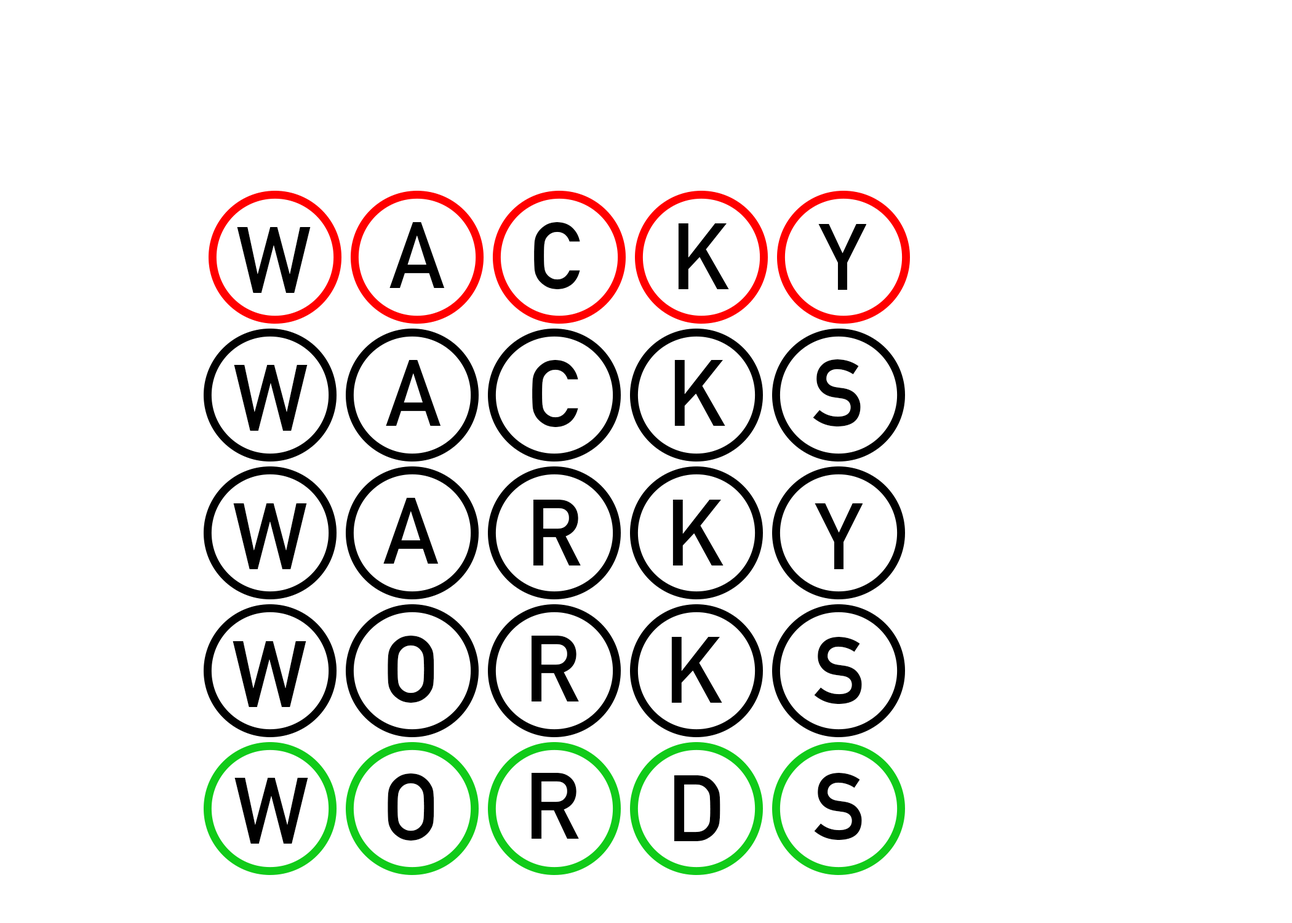
<style>
.page{position:relative;width:1292px;height:923px;background:#ffffff}
.page>*{position:absolute;margin:0}
.t1{font:92.3px "DINAlternate-Bold";color:#000000}
</style>
<div class="page">
<p class="t1" style="left:237px;top:227px;width:74px;height:66px">W</p>
<p class="t1" style="left:389px;top:222px;width:56px;height:66px">A</p>
<p class="t1" style="left:534px;top:222px;width:46px;height:67px">C</p>
<p class="t1" style="left:678px;top:223px;width:51px;height:66px">K</p>
<p class="t1" style="left:818px;top:224px;width:48px;height:66px">Y</p>
<p class="t1" style="left:234px;top:365px;width:74px;height:66px">W</p>
<p class="t1" style="left:386px;top:360px;width:55px;height:66px">A</p>
<p class="t1" style="left:532px;top:360px;width:46px;height:67px">C</p>
<p class="t1" style="left:674px;top:360px;width:51px;height:66px">K</p>
<p class="t1" style="left:813px;top:359px;width:48px;height:67px">S</p>
<p class="t1" style="left:383px;top:498px;width:56px;height:66px">A</p>
<p class="t1" style="left:233px;top:503px;width:74px;height:66px">W</p>
<p class="t1" style="left:533px;top:500px;width:48px;height:65px">R</p>
<p class="t1" style="left:672px;top:500px;width:52px;height:65px">K</p>
<p class="t1" style="left:815px;top:503px;width:48px;height:66px">Y</p>
<p class="t1" style="left:233px;top:641px;width:73px;height:66px">W</p>
<p class="t1" style="left:388px;top:636px;width:46px;height:67px">O</p>
<p class="t1" style="left:531px;top:636px;width:48px;height:65px">R</p>
<p class="t1" style="left:671px;top:637px;width:51px;height:66px">K</p>
<p class="t1" style="left:814px;top:637px;width:48px;height:67px">S</p>
<p class="t1" style="left:388px;top:773px;width:46px;height:67px">O</p>
<p class="t1" style="left:531px;top:773px;width:48px;height:66px">R</p>
<p class="t1" style="left:814px;top:773px;width:48px;height:67px">S</p>
<p class="t1" style="left:234px;top:778px;width:74px;height:66px">W</p>
<p class="t1" style="left:674px;top:775px;width:46px;height:66px">D</p>
</div>
